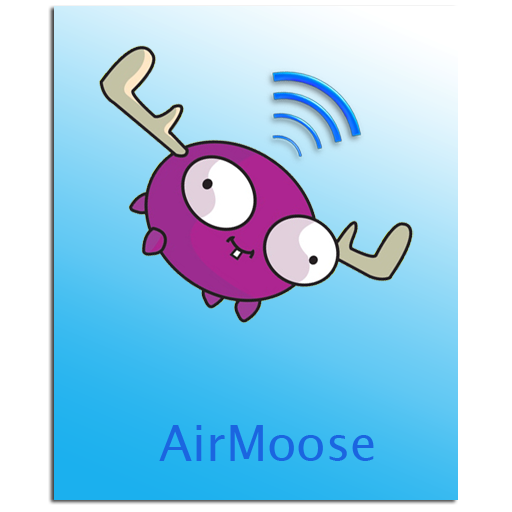
<style>
.page{position:relative;width:512px;height:512px;background:#ffffff}
.page>*{position:absolute;margin:0}
.t1{font:48px "LucidaGrande";color:#1b65e0}
</style>
<div class="page">
<p class="t1" style="left:159px;top:425px;width:215px;height:36px">AirMoose</p>
</div>
